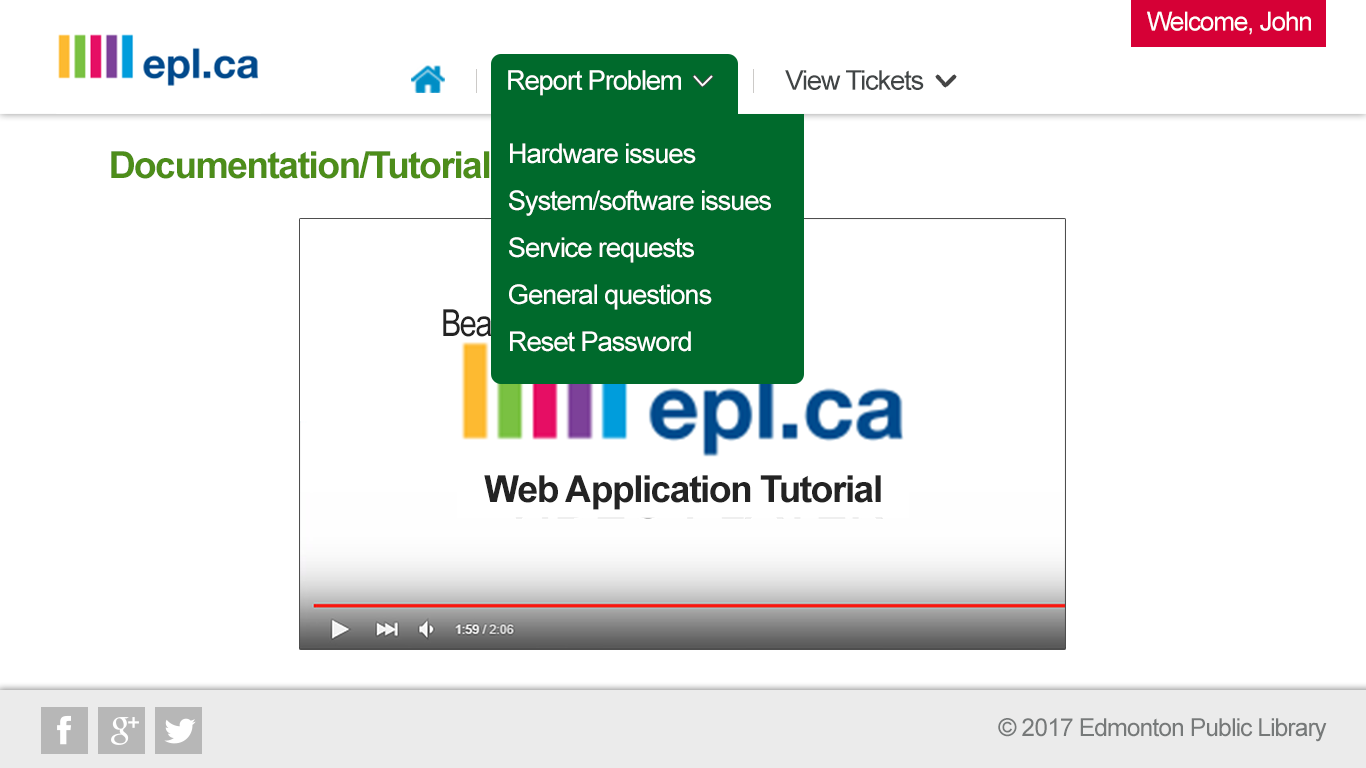
<style>
.page{position:relative;width:1366px;height:768px;background:#ffffff}
.page>*{position:absolute;margin:0}
.t1{font:26px "ArialMT";letter-spacing:-0.04em;color:#ffffff}
.t2{font:27.3px "ArialMT";letter-spacing:-0.04em;color:#ffffff}
.t3{font:27.3px "ArialMT";letter-spacing:-0.04em;color:#414546}
.t4{font:37.2px "Arial-BoldMT";letter-spacing:-0.04em;color:#4d8d1a}
.t5{font:37.2px "ArialNarrow";letter-spacing:-0.04em;color:#006a2c}
.t6{font:37.2px "Arial-BoldMT";letter-spacing:-0.04em;color:#232323}
.t7{font:24.8px "ArialMT";letter-spacing:-0.04em;color:#767979}
</style>
<div class="page">
<p class="t1" style="left:1147px;top:11px;width:164px;height:24px">Welcome, John</p>
<p class="t2" style="left:508px;top:70px;width:173px;height:26px">Report Problem</p>
<p class="t3" style="left:785px;top:70px;width:139px;height:20px">View Tickets</p>
<p class="t2" style="left:510px;top:143px;width:186px;height:21px">Hardware issues</p>
<p class="t4" style="left:111px;top:151px;width:388px;height:28px">Documentation/Tutorial:</p>
<p class="t2" style="left:509px;top:190px;width:262px;height:26px">System/software issues</p>
<p class="t2" style="left:509px;top:237px;width:185px;height:26px">Service requests</p>
<p class="t2" style="left:509px;top:284px;width:203px;height:26px">General questions</p>
<p class="t5" style="left:443px;top:309px;width:215px;height:35px">BeardedMonkeys</p>
<p class="t2" style="left:510px;top:331px;width:181px;height:21px">Reset Password</p>
<p class="t6" style="left:484px;top:475px;width:397px;height:35px">Web Application Tutorial</p>
<p class="t7" style="left:998px;top:718px;width:329px;height:24px">© 2017 Edmonton Public Library</p>
</div>
